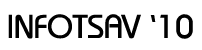
<style>
.page{position:relative;width:202px;height:50px;background:#ffffff}
.page>*{position:absolute;margin:0}
.t1{font:33px "Bauhaus";color:#000000}
</style>
<div class="page">
<p class="t1" style="left:8px;top:14px;width:185px;height:25px">INFOTSAV ‘10</p>
</div>
